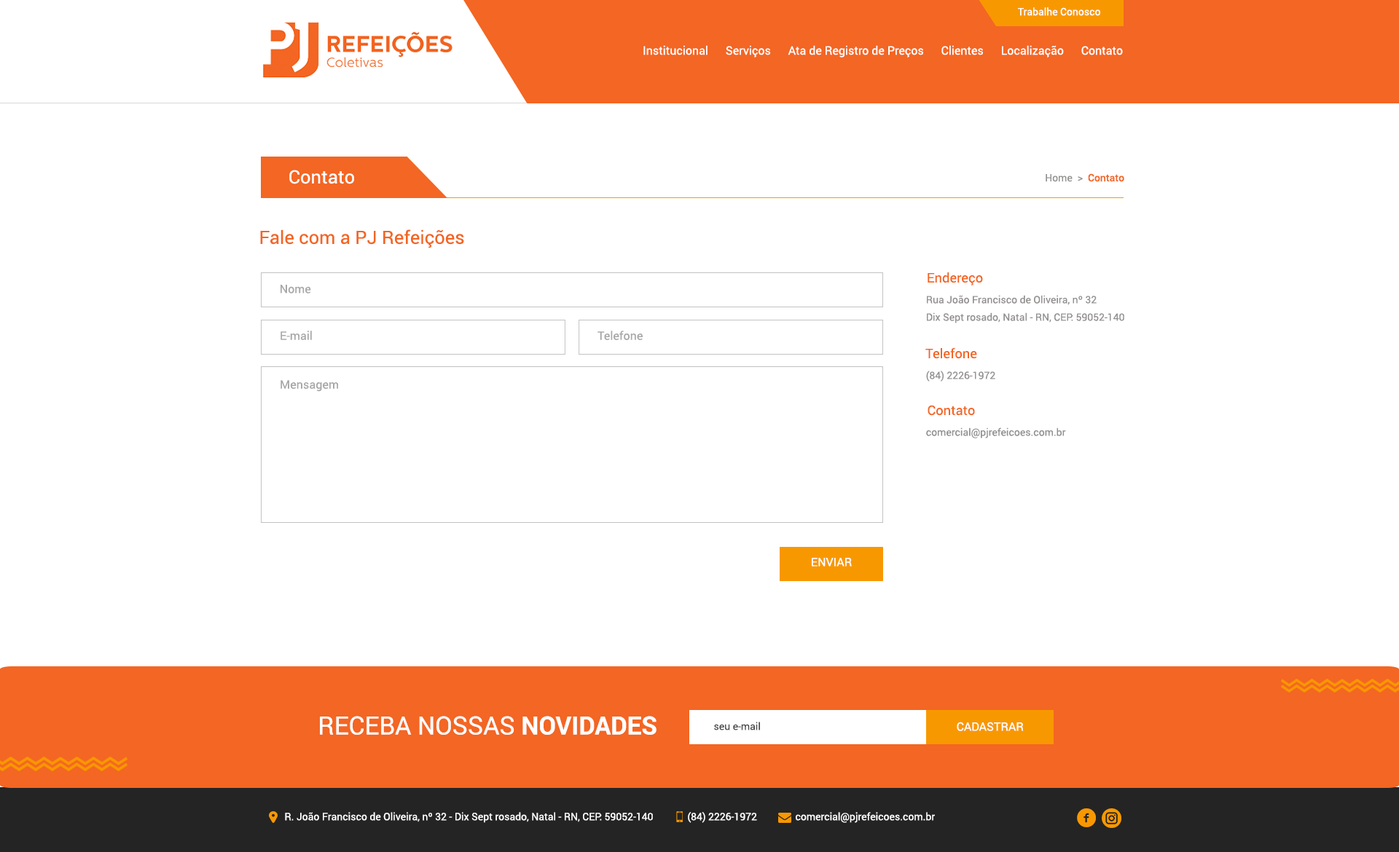
<style>
.page{position:relative;width:1399px;height:852px;background:#ffffff}
.page>*{position:absolute;margin:0}
.t1{font:10.2px "Roboto-Regular";color:#ffffff}
.t2{font:11.7px "Roboto-Regular";color:#ffffff}
.t3{font:18.2px "Roboto-Regular";color:#ffffff}
.t4{font:10.2px "Roboto-Regular";color:#939392}
.t5{font:10.2px "Roboto-Medium";color:#f36623}
.t6{font:18.2px "Roboto-Regular";color:#f36623}
.t7{font:13.1px "Roboto-Regular";color:#f36623}
.t8{font:11.7px "Roboto-Regular";color:#a8a8a8}
.t9{font:10.2px/17.5px "Roboto-Regular";color:#939090}
.t10{font:11.6px "Roboto-Regular";color:#a8a8a8}
.t11{font:10.2px "Roboto-Regular";color:#939090}
.t12{font:25.2px "Roboto-Regular";color:#ffffff;text-transform:uppercase}
.t13{font:25.2px "Roboto-Bold";color:#ffffff;text-transform:uppercase}
.t14{font:10.2px "Roboto-Regular";color:#4c4b4b}
</style>
<div class="page">
<p class="t1" style="left:1018px;top:7px;width:82px;height:9px">Trabalhe Conosco</p>
<p class="t2" style="left:643px;top:45px;width:480px;height:13px">Institucional      Serviços      Ata de Registro de Preços      Clientes      Localização      Contato</p>
<p class="t3" style="left:289px;top:170px;width:65px;height:14px">Contato</p>
<p class="t4" style="left:1046px;top:173px;width:78px;height:9px">Home  &gt;  <span class="t5">Contato</span></p>
<p class="t6" style="left:260px;top:230px;width:204px;height:18px">Fale com a PJ Refeições</p>
<p class="t7" style="left:927px;top:272px;width:56px;height:14px">Endereço</p>
<p class="t8" style="left:281px;top:285px;width:30px;height:9px">Nome</p>
<p class="t9" style="left:927px;top:295px;width:197px;height:28px;text-align:justify">Rua João Francisco de Oliveira, nº 32<br>Dix Sept rosado, Natal - RN, CEP: 59052-140</p>
<p class="t10" style="left:281px;top:331px;width:31px;height:9px">E-mail</p>
<p class="t10" style="left:597px;top:331px;width:46px;height:9px">Telefone</p>
<p class="t7" style="left:925px;top:348px;width:52px;height:11px">Telefone</p>
<p class="t11" style="left:926px;top:371px;width:69px;height:11px">(84) 2226-1972</p>
<p class="t10" style="left:281px;top:380px;width:57px;height:12px">Mensagem</p>
<p class="t7" style="left:927px;top:405px;width:48px;height:11px">Contato</p>
<p class="t11" style="left:926px;top:428px;width:140px;height:11px">comercial@pjrefeicoes.com.br</p>
<p class="t2" style="left:812px;top:558px;width:40px;height:9px">ENVIAR</p>
<p class="t12" style="left:320px;top:716px;width:336px;height:19px">Receba nossas <span class="t13">Novidades</span></p>
<p class="t14" style="left:714px;top:722px;width:46px;height:9px">seu e-mail</p>
<p class="t2" style="left:957px;top:722px;width:67px;height:9px">CADASTRAR</p>
<p class="t1" style="left:285px;top:812px;width:368px;height:11px">R. João Francisco de Oliveira, nº 32 - Dix Sept rosado, Natal - RN, CEP: 59052-140</p>
<p class="t1" style="left:688px;top:812px;width:69px;height:11px">(84) 2226-1972</p>
<p class="t1" style="left:796px;top:812px;width:139px;height:11px">comercial@pjrefeicoes.com.br</p>
</div>
